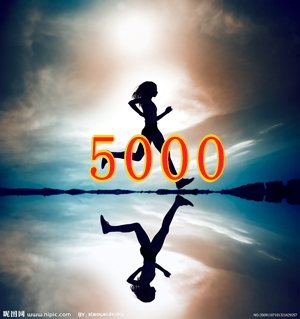
<style>
.page{position:relative;width:300px;height:319px}
.page>*{position:absolute;margin:0}
.t1{font:62.3px "SimSun";letter-spacing:0.08em}
.t2{font:62.3px "SimSun";letter-spacing:0.08em;color:#ff1d1d}
</style>
<div class="page">
<p class="t1" style="left:88px;top:136px;width:134px;height:44px">5000</p>
<p class="t1" style="left:90px;top:134px;width:134px;height:44px">5000</p>
<p class="t2" style="left:90px;top:136px;width:134px;height:44px">5000</p>
<p class="t1" style="left:92px;top:137px;width:133px;height:44px">5000</p>
<p class="t1" style="left:89px;top:139px;width:134px;height:44px">5000</p>
</div>
